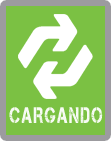
<style>
.page{position:relative;width:111px;height:141px;background:#7bc143}
.page>*{position:absolute;margin:0}
.t1{font:22.4px "Captureit";letter-spacing:0.1em;color:#fefefe;scale:0.71 1}
</style>
<div class="page">
<p class="t1" style="left:9px;top:107px;width:94px;height:17px;opacity:0.95">CARGANDO</p>
</div>
